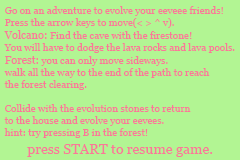
<style>
.page{position:relative;width:240px;height:160px;background:#b2f593}
.page>*{position:absolute;margin:0}
.t1{font:10px "Georgia";color:#f97998}
.t2{font:11px "Georgia";color:#f97998}
.t3{font:14px "Georgia";color:#f97998}
</style>
<div class="page">
<p class="t1" style="left:4px;top:6px;width:231px;height:132px">Go on an adventure to evolve your eeveee friends!<br>Press the arrow keys to move(&lt; &gt; ^ v). <br><span class="t2">Volcano: </span>Find the cave with the firestone! <br>You will have to dodge the lava rocks and lava pools.<br><span class="t2">Forest: </span>you can only move sideways. <br>walk all the way to the end of the path to reach <br>the forest clearing. <br><br>Collide with the evolution stones to return <br>to the house and evolve your eevees.<br>hint: try pressing B in the forest!</p>
<p class="t3" style="left:27px;top:144px;width:186px;height:13px">press START to resume game.</p>
</div>
